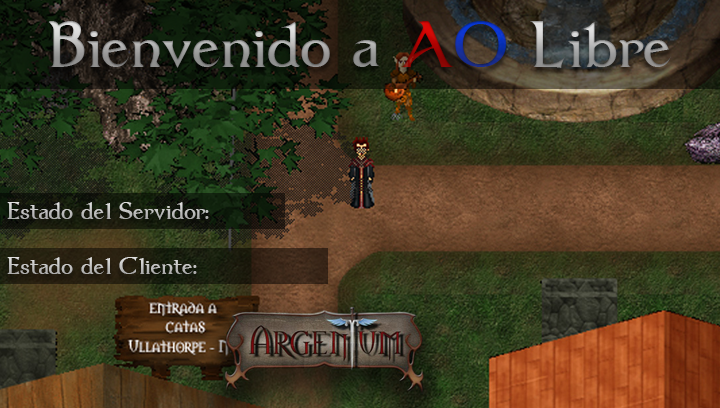
<style>
.page{position:relative;width:720px;height:408px}
.page>*{position:absolute;margin:0}
.t1{font:74px "Dumbledor1"}
.t2{font:28px "Dumbledor1";color:#bebebe}
.t3{font:28px "Dumbledor1";color:#bebfbe}
</style>
<div class="page">
<p class="t1" style="left:49px;top:21px;width:622px;height:47px">Bienvenido a AO Libre</p>
<p class="t2" style="left:7px;top:202px;width:202px;height:18px">Estado del Servidor:</p>
<p class="t3" style="left:7px;top:257px;width:190px;height:17px">Estado del Cliente:</p>
</div>
